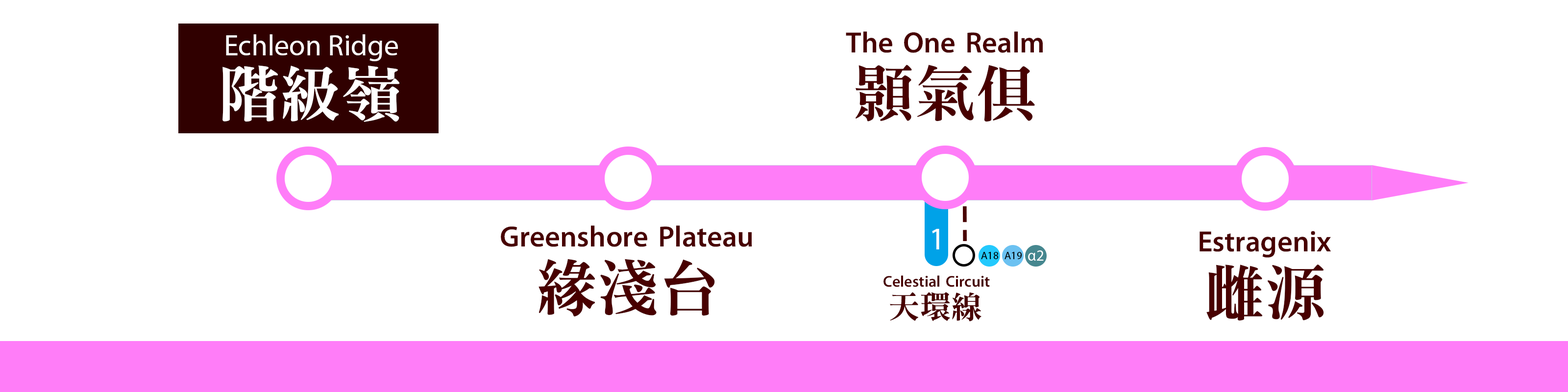
<style>
.page{position:relative;width:1568px;height:392px;background:#ffffff}
.page>*{position:absolute;margin:0}
.t1{font:29.4px "MyriadPro-Regular";color:#ffffff}
.t2{font:29.4px "MTR-Sung";color:#480000}
.t3{font:61.2px "MTR-Sung";color:#ffffff}
.t4{font:61.2px "MTR-Sung";color:#480000}
.t5{font:31.4px "MyriadPro-Regular";color:#ffffff}
.t6{font:10.9px "MyriadPro-Regular";color:#000000}
.t7{font:15.4px "MyriadPro-Regular";color:#ffffff}
.t8{font:15.7px "MTR-Sung";color:#480000}
.t9{font:31.4px "MTR-Sung";color:#480000}
</style>
<div class="page">
<p class="t1" style="left:226px;top:34px;width:172px;height:27px">Echleon Ridge</p>
<p class="t2" style="left:846px;top:31px;width:197px;height:22px">The One Realm</p>
<p class="t3" style="left:222px;top:65px;width:178px;height:57px">階級嶺</p>
<p class="t4" style="left:855px;top:65px;width:180px;height:57px">顥氣俱</p>
<p class="t2" style="left:501px;top:225px;width:251px;height:22px">Greenshore Plateau</p>
<p class="t5" style="left:932px;top:229px;width:7px;height:20px">1</p>
<p class="t2" style="left:1200px;top:231px;width:131px;height:27px">Estragenix</p>
<p class="t6" style="left:981px;top:252px;width:18px;height:7px">A18</p>
<p class="t6" style="left:1004px;top:252px;width:18px;height:7px">A19</p>
<p class="t7" style="left:1028px;top:250px;width:16px;height:11px">α2</p>
<p class="t4" style="left:539px;top:259px;width:176px;height:58px">緣淺台</p>
<p class="t4" style="left:1206px;top:264px;width:118px;height:57px">雌源</p>
<p class="t8" style="left:883px;top:275px;width:107px;height:12px">Celestial Circuit</p>
<p class="t9" style="left:890px;top:292px;width:91px;height:29px">天環線</p>
</div>
